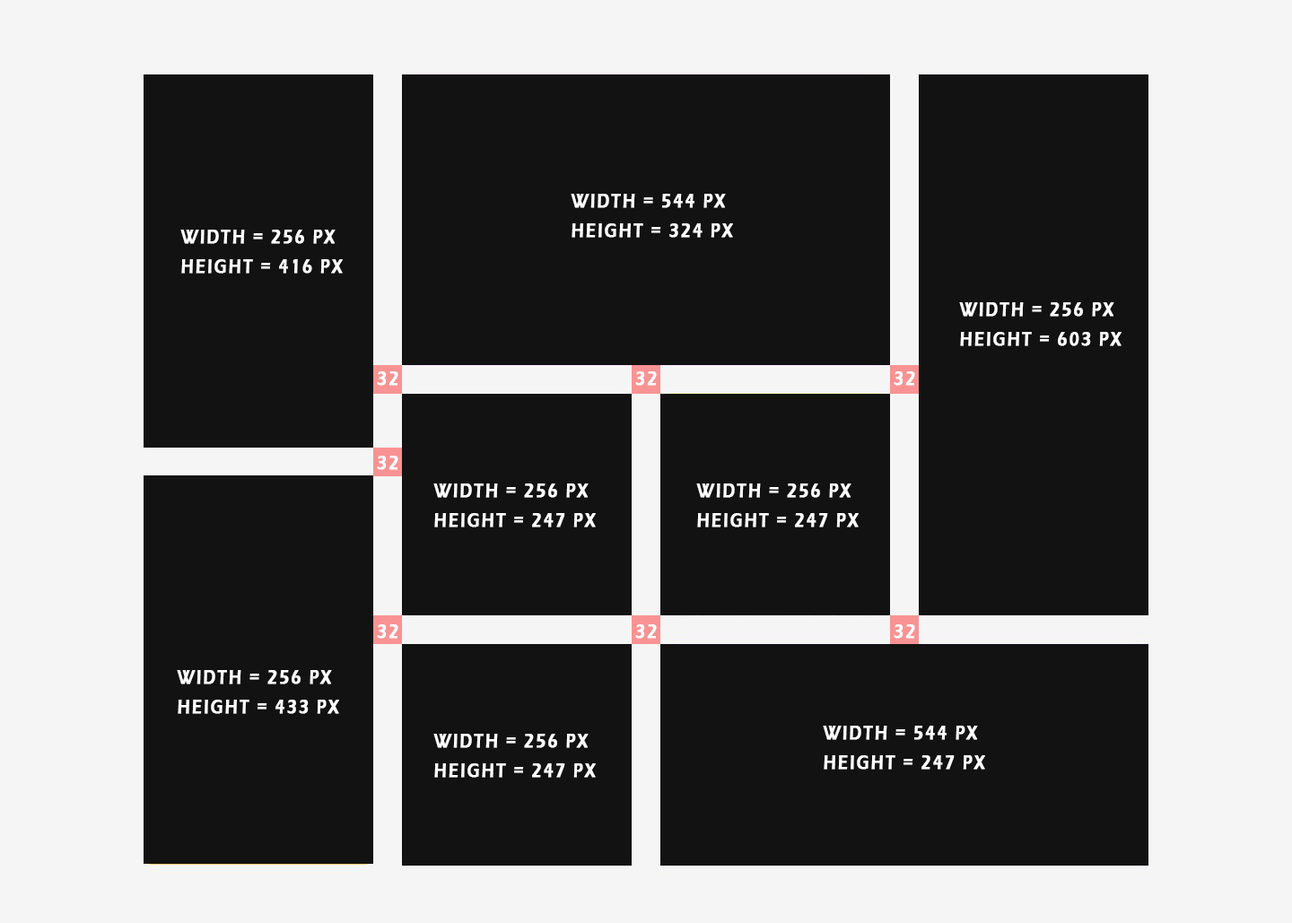
<style>
.page{position:relative;width:1292px;height:923px;background:#121212}
.page>*{position:absolute;margin:0}
.t1{font:21px/22.4px "ErasITC-Demi";letter-spacing:0.1em;color:#ffffff;text-transform:uppercase;font-weight:bold;scale:0.77 1}
.t2{font:21px "ErasITC-Demi";letter-spacing:0.1em;color:#ffffff;text-transform:uppercase;font-weight:bold;scale:0.77 1}
</style>
<div class="page">
<p class="t1" style="left:571px;top:194px;width:162px;height:44px">width = 544 px<br>height = 324 px</p>
<p class="t1" style="left:180px;top:230px;width:163px;height:44px">width = 256 px<br>height = 416 px</p>
<p class="t1" style="left:959px;top:302px;width:162px;height:44px">width = 256 px<br>height = 603 px</p>
<p class="t2" style="left:377px;top:371px;width:21px;height:15px">32</p>
<p class="t2" style="left:635px;top:371px;width:22px;height:15px">32</p>
<p class="t2" style="left:893px;top:371px;width:22px;height:15px">32</p>
<p class="t2" style="left:377px;top:456px;width:21px;height:14px">32</p>
<p class="t1" style="left:433px;top:484px;width:163px;height:43px">width = 256 px<br>height = 247 px</p>
<p class="t1" style="left:696px;top:484px;width:162px;height:43px">width = 256 px<br>height = 247 px</p>
<p class="t2" style="left:377px;top:624px;width:21px;height:15px">32</p>
<p class="t2" style="left:635px;top:624px;width:22px;height:15px">32</p>
<p class="t2" style="left:893px;top:624px;width:22px;height:15px">32</p>
<p class="t1" style="left:177px;top:670px;width:162px;height:44px">width = 256 px<br>height = 433 px</p>
<p class="t1" style="left:823px;top:726px;width:162px;height:44px">width = 544 px<br>height = 247 px</p>
<p class="t1" style="left:433px;top:734px;width:163px;height:44px">width = 256 px<br>height = 247 px</p>
</div>
